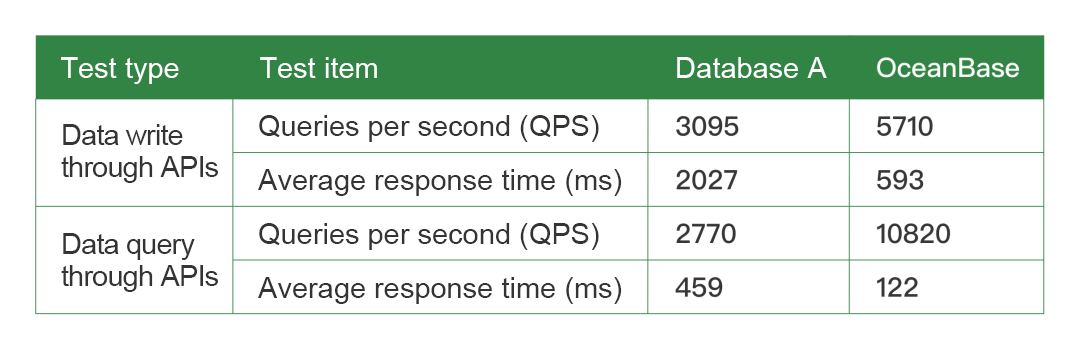
<style>
.page{position:relative;width:1080px;height:358px;background:#ffffff}
.page>*{position:absolute;margin:0}
.t1{font:29px "ArialMT";color:#fefefe}
.t2{font:29px/32px "ArialMT";letter-spacing:-0.03em;color:#343434}
.t3{font:29px/54px "ArialMT";color:#343434}
</style>
<div class="page">
<p class="t1" style="left:61px;top:57px;width:118px;height:27px">Test type</p>
<p class="t1" style="left:260px;top:57px;width:117px;height:21px">Test item</p>
<p class="t1" style="left:677px;top:57px;width:150px;height:21px">Database A</p>
<p class="t2" style="left:61px;top:124px;width:157px;height:59px">Data write through APIs</p>
<p class="t3" style="left:258px;top:115px;width:364px;height:189px">Queries per second (QPS)<br>Average response time (ms)<br>Queries per second (QPS)<br>Average response time (ms)</p>
<p class="t2" style="left:61px;top:233px;width:157px;height:59px">Data query through APIs</p>
</div>
